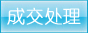
<style>
.page{position:relative;width:88px;height:33px}
.page>*{position:absolute;margin:0}
.t1{font:18px "YouYuan";color:#ffffff;font-weight:bold}
</style>
<div class="page">
<p class="t1" style="left:7px;top:7px;width:74px;height:18px">成交处理</p>
</div>
